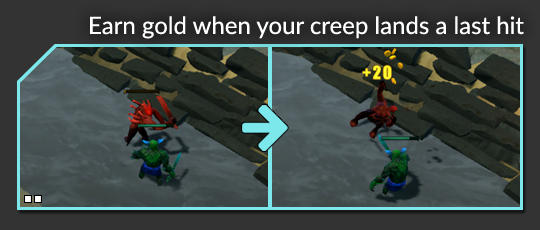
<style>
.page{position:relative;width:540px;height:230px}
.page>*{position:absolute;margin:0}
.t1{font:24px "Lato-Regular";color:#feffff}
</style>
<div class="page">
<p class="t1" style="left:90px;top:16px;width:434px;height:23px">Earn gold when your creep lands a last hit</p>
</div>
